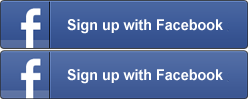
<style>
.page{position:relative;width:248px;height:99px}
.page>*{position:absolute;margin:0}
.t1{font:15.1px "Arial-BoldMT";color:#ffffff;scale:0.95 1}
</style>
<div class="page">
<p class="t1" style="left:67px;top:19px;width:156px;height:15px">Sign up with Facebook</p>
<p class="t1" style="left:67px;top:69px;width:156px;height:15px">Sign up with Facebook</p>
</div>
